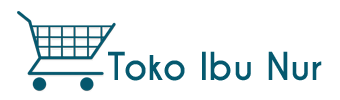
<style>
.page{position:relative;width:340px;height:100px;background:#ffffff}
.page>*{position:absolute;margin:0}
.t1{font:36px "CaviarDreams-Bold";color:#05596f}
</style>
<div class="page">
<p class="t1" style="left:108px;top:51px;width:214px;height:30px">Toko Ibu Nur</p>
</div>
